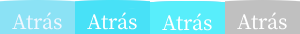
<style>
.page{position:relative;width:300px;height:34px;background:#c0c0c0}
.page>*{position:absolute;margin:0}
.t1{font:24px "OfficialFateFont-Medium";color:#eff7ff}
.t2{font:24px "OfficialFateFont-Medium";color:#ffffff}
</style>
<div class="page">
<p class="t1" style="left:12px;top:12px;width:50px;height:18px">Atrás</p>
<p class="t1" style="left:87px;top:12px;width:50px;height:18px">Atrás</p>
<p class="t1" style="left:162px;top:13px;width:50px;height:18px">Atrás</p>
<p class="t2" style="left:237px;top:12px;width:50px;height:18px">Atrás</p>
</div>
